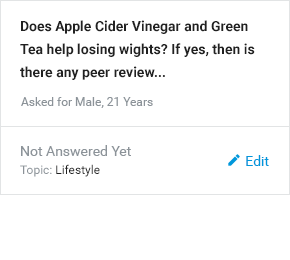
<style>
.page{position:relative;width:290px;height:260px;background:#ffffff}
.page>*{position:absolute;margin:0}
.t1{font:14px/23px "Roboto-Bold";color:#212121}
.t2{font:12px "Roboto-Regular";color:#8c9399}
.t3{font:14px "Roboto-Regular";color:#8c9399}
.t4{font:14px "Roboto-Regular";color:#0097db}
.t5{font:12px "Roboto-Regular";color:#212121}
</style>
<div class="page">
<p class="t1" style="left:20px;top:20px;width:235px;height:60px">Does Apple Cider Vinegar and Green Tea help losing wights? If yes, then is there any peer review...</p>
<p class="t2" style="left:21px;top:97px;width:132px;height:11px">Asked for Male, 21 Years</p>
<p class="t3" style="left:21px;top:145px;width:110px;height:11px">Not Answered Yet</p>
<p class="t4" style="left:246px;top:155px;width:23px;height:11px">Edit</p>
<p class="t5" style="left:20px;top:164px;width:80px;height:13px"><span class="t2">Topic: </span>Lifestyle</p>
</div>
